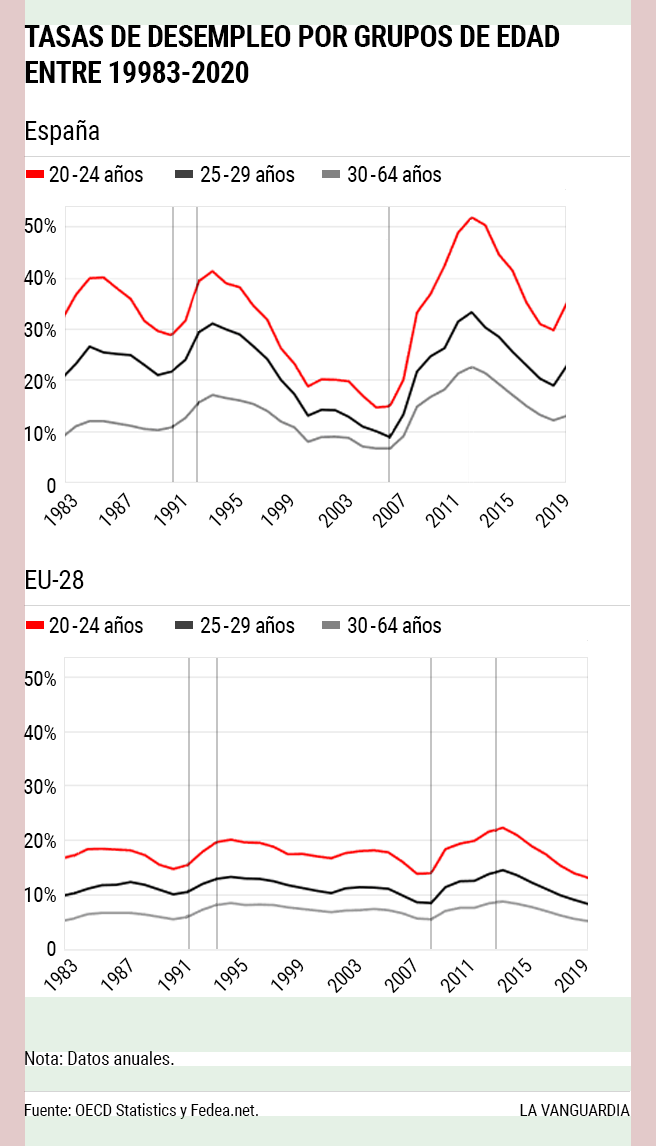
<style>
.page{position:relative;width:656px;height:1146px;background:#ffffff}
.page>*{position:absolute;margin:0}
.t1{font:30px/36px "RobotoCondensed-Bold";letter-spacing:-0.02em;color:#000000;text-transform:uppercase}
.t2{font:27px "RobotoCondensed-Regular";letter-spacing:-0.01em;color:#000000}
.t3{font:22px "RobotoCondensed-Regular";letter-spacing:-0.03em;color:#000000}
.t4{font:22px "RobotoCondensed-Regular";letter-spacing:-0.09em;color:#000000}
.t5{font:21px/52px "RobotoCondensed-Regular";letter-spacing:-0.014em;color:#000000}
.t6{font:20px "RobotoCondensed-Regular";letter-spacing:-0.014em;color:#000000}
.t7{font:21px/54px "RobotoCondensed-Regular";letter-spacing:-0.014em;color:#000000}
.t8{font:19px "RobotoCondensed-Regular";letter-spacing:-0.014em;color:#000000}
.t9{font:17px "RobotoCondensed-Regular";letter-spacing:-0.014em;color:#000000}
</style>
<div class="page">
<p class="t1" style="left:24px;top:25px;width:536px;height:58px">Tasas de desempleo por grupos de edad entre 19983-2020</p>
<p class="t2" style="left:26px;top:120px;width:73px;height:25px">España</p>
<p class="t3" style="left:49px;top:165px;width:393px;height:17px">20<span class="t4"> - </span>24 años             25<span class="t4"> - </span>29 años            30<span class="t4"> - </span>64 años</p>
<p class="t5" style="left:23px;top:218px;width:33px;height:275px;text-align:right">50%<br>40%<br>30%<br>20%<br>10%<br>0</p>
<p class="t6" style="left:44px;top:494px;width:34px;height:32px;rotate:-45deg">1983</p>
<p class="t6" style="left:99px;top:492px;width:32px;height:34px;rotate:-45deg">1987</p>
<p class="t6" style="left:154px;top:494px;width:33px;height:32px;rotate:-45deg">1991</p>
<p class="t6" style="left:209px;top:492px;width:34px;height:34px;rotate:-45deg">1995</p>
<p class="t6" style="left:261px;top:494px;width:33px;height:32px;rotate:-45deg">1999</p>
<p class="t6" style="left:318px;top:494px;width:35px;height:35px;rotate:-45deg">2003</p>
<p class="t6" style="left:372px;top:492px;width:33px;height:37px;rotate:-45deg">2007</p>
<p class="t6" style="left:425px;top:494px;width:34px;height:35px;rotate:-45deg">2011</p>
<p class="t6" style="left:479px;top:492px;width:35px;height:37px;rotate:-45deg">2015</p>
<p class="t6" style="left:535px;top:494px;width:34px;height:35px;rotate:-45deg">2019</p>
<p class="t2" style="left:26px;top:570px;width:58px;height:19px">EU-28</p>
<p class="t3" style="left:49px;top:616px;width:393px;height:17px">20<span class="t4"> - </span>24 años             25<span class="t4"> - </span>29 años            30<span class="t4"> - </span>64 años</p>
<p class="t7" style="left:23px;top:671px;width:33px;height:285px;text-align:right">50%<br>40%<br>30%<br>20%<br>10%<br>0</p>
<p class="t6" style="left:44px;top:959px;width:34px;height:32px;rotate:-45deg">1983</p>
<p class="t6" style="left:101px;top:957px;width:32px;height:34px;rotate:-45deg">1987</p>
<p class="t6" style="left:158px;top:959px;width:33px;height:32px;rotate:-45deg">1991</p>
<p class="t6" style="left:214px;top:957px;width:34px;height:34px;rotate:-45deg">1995</p>
<p class="t6" style="left:271px;top:959px;width:33px;height:32px;rotate:-45deg">1999</p>
<p class="t6" style="left:327px;top:959px;width:35px;height:35px;rotate:-45deg">2003</p>
<p class="t6" style="left:384px;top:957px;width:33px;height:37px;rotate:-45deg">2007</p>
<p class="t6" style="left:440px;top:959px;width:34px;height:35px;rotate:-45deg">2011</p>
<p class="t6" style="left:497px;top:957px;width:35px;height:37px;rotate:-45deg">2015</p>
<p class="t6" style="left:554px;top:959px;width:34px;height:35px;rotate:-45deg">2019</p>
<p class="t8" style="left:25px;top:1051px;width:149px;height:14px">Nota: Datos anuales.</p>
<p class="t9" style="left:24px;top:1103px;width:234px;height:16px">Fuente: OECD Statistics y Fedea.net.</p>
<p class="t9" style="left:520px;top:1104px;width:110px;height:12px">LA VANGUARDIA</p>
</div>
